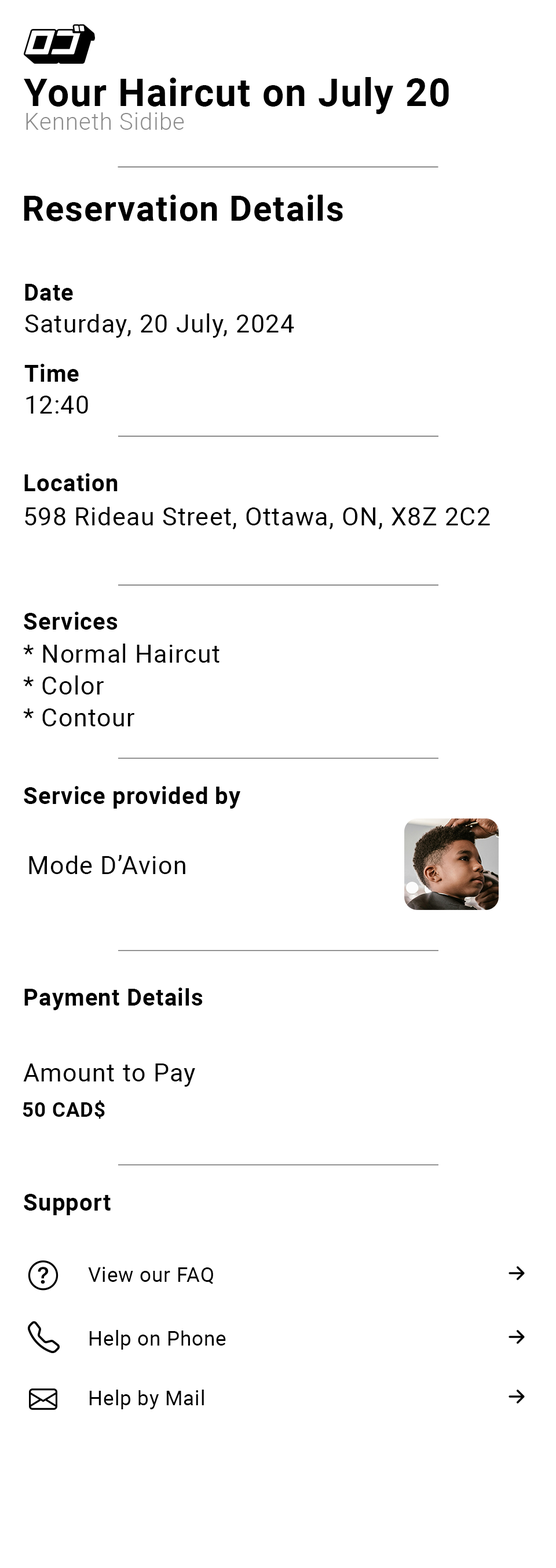
<style>
.page{position:relative;width:556px;height:1568px;background:#ffffff}
.page>*{position:absolute;margin:0}
.t1{font:38.2px "Roboto-Bold";letter-spacing:0.03em;color:#000000}
.t2{font:23.2px "Roboto-Light";letter-spacing:0.03em;color:#8c8c8c}
.t3{font:34.8px "Roboto-Bold";letter-spacing:0.03em;color:#000000}
.t4{font:23.2px "Roboto-Bold";letter-spacing:0.03em;color:#000000}
.t5{font:25px "Roboto-Regular";letter-spacing:0.03em;color:#000000}
.t6{font:20.3px "Roboto-Bold";letter-spacing:0.03em;color:#000000}
.t7{font:20.2px "Roboto-Regular";letter-spacing:0.03em;color:#000000}
</style>
<div class="page">
<p class="t1" style="left:24px;top:77px;width:425px;height:37px">Your Haircut on July 20</p>
<p class="t2" style="left:26px;top:112px;width:158px;height:18px">Kenneth Sidibe</p>
<p class="t3" style="left:24px;top:195px;width:319px;height:26px">Reservation Details</p>
<p class="t4" style="left:25px;top:284px;width:48px;height:17px">Date</p>
<p class="t5" style="left:25px;top:313px;width:269px;height:25px">Saturday, 20 July, 2024</p>
<p class="t4" style="left:24px;top:364px;width:55px;height:18px">Time</p>
<p class="t5" style="left:26px;top:396px;width:62px;height:18px">12:40</p>
<p class="t4" style="left:24px;top:473px;width:94px;height:18px">Location</p>
<p class="t5" style="left:25px;top:507px;width:465px;height:22px">598 Rideau Street, Ottawa, ON, X8Z 2C2</p>
<p class="t4" style="left:24px;top:612px;width:94px;height:18px">Services</p>
<p class="t5" style="left:23px;top:644px;width:197px;height:19px">* Normal Haircut</p>
<p class="t5" style="left:23px;top:675px;width:81px;height:20px">* Color</p>
<p class="t5" style="left:23px;top:708px;width:111px;height:18px">* Contour</p>
<p class="t4" style="left:24px;top:786px;width:216px;height:23px">Service provided by</p>
<p class="t5" style="left:29px;top:855px;width:156px;height:19px">Mode D’Avion</p>
<p class="t4" style="left:24px;top:988px;width:179px;height:22px">Payment Details</p>
<p class="t5" style="left:23px;top:1063px;width:172px;height:24px">Amount to Pay</p>
<p class="t6" style="left:23px;top:1100px;width:82px;height:19px">50 CAD$</p>
<p class="t4" style="left:24px;top:1194px;width:87px;height:21px">Support</p>
<p class="t7" style="left:88px;top:1267px;width:125px;height:17px">View our FAQ</p>
<p class="t7" style="left:89px;top:1330px;width:137px;height:20px">Help on Phone</p>
<p class="t7" style="left:89px;top:1390px;width:115px;height:19px">Help by Mail</p>
</div>
